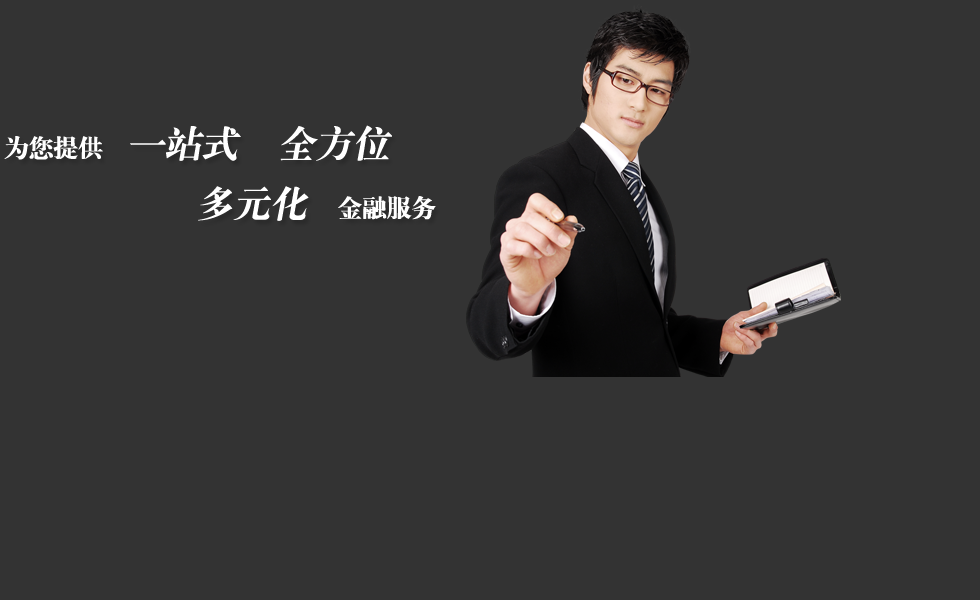
<style>
.page{position:relative;width:980px;height:600px;background:#333333}
.page>*{position:absolute;margin:0}
.t1{font:36px/72px "CTBiaoSongSJ";color:#ffffff;font-weight:bold;font-style:italic}
.t2{font:24px/60px "CTBiaoSongSJ";color:#ffffff;font-weight:bold}
.t3{font:36px/60px "CTBiaoSongSJ";color:#ffffff;font-weight:bold;font-style:italic}
</style>
<div class="page">
<p class="t1" style="left:4px;top:125px;width:432px;height:96px"><span class="t2">为您提供   </span>一站式    全方位 <br>                       <span class="t3">多元化   </span><span class="t2">金融服务</span></p>
</div>
